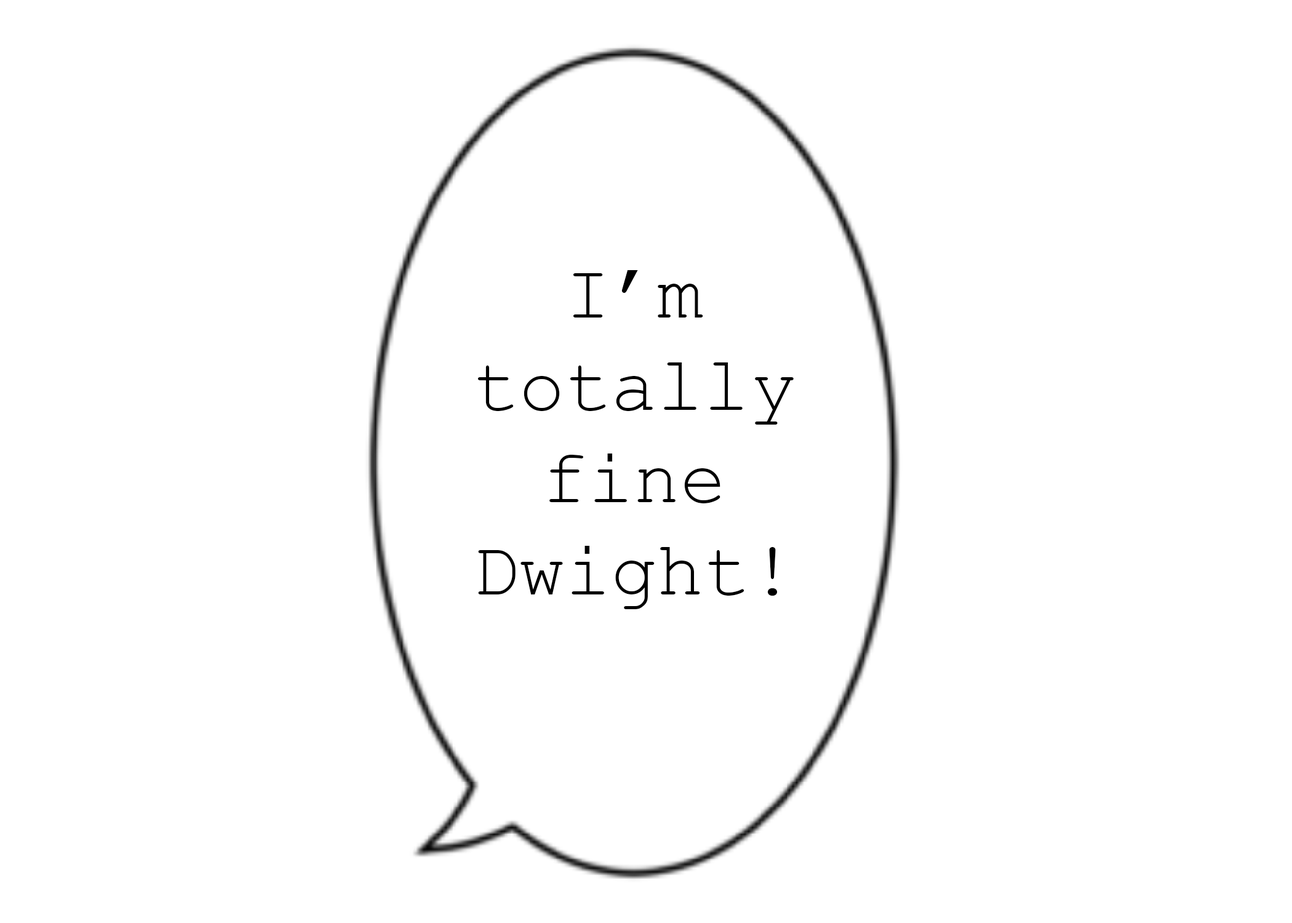
<style>
.page{position:relative;width:1292px;height:923px;background:#ffffff}
.page>*{position:absolute;margin:0}
.t1{font:76.9px "CourierNewPSMT";color:#000000}
</style>
<div class="page">
<p class="t1" style="left:477px;top:270px;width:317px;height:339px;text-align:center">I’m totally fine Dwight!</p>
</div>
